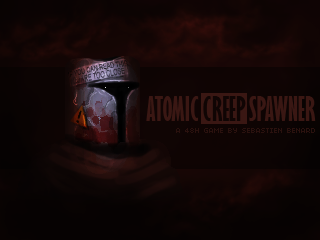
<style>
.page{position:relative;width:320px;height:240px}
.page>*{position:absolute;margin:0}
.t1{font:30.9px "GillSans-BoldExtraCondensed";color:#3a1713;text-transform:uppercase}
.t2{font:30.9px "GillSans-BoldExtraCondensed";color:#100504;text-transform:uppercase}
.t3{font:8px "04b03";color:#2a110e;text-transform:uppercase}
</style>
<div class="page">
<p class="t1" style="left:146px;top:96px;width:170px;height:25px">atomic<span class="t2"> creep </span>spawner</p>
<p class="t3" style="left:176px;top:128px;width:139px;height:5px">A 48h game by Sebastien Benard</p>
</div>
